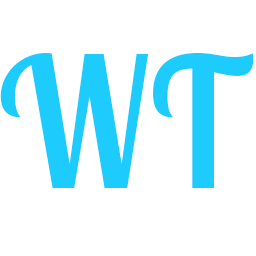
<style>
.page{position:relative;width:256px;height:256px;background:#ffffff}
.page>*{position:absolute;margin:0}
.t1{font:180.3px "LobsterTwo-Bold";color:#1ecbfd;scale:0.83 1}
</style>
<div class="page">
<p class="t1" style="left:0px;top:52px;width:254px;height:136px">WT</p>
</div>
